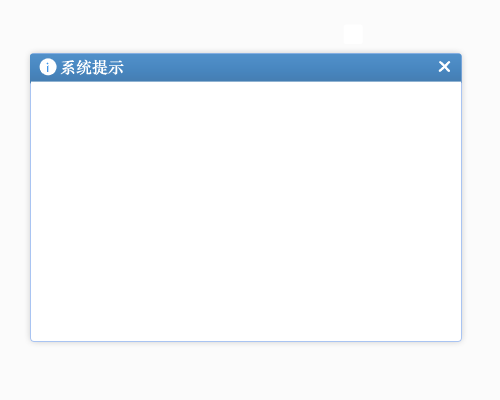
<style>
.page{position:relative;width:500px;height:400px;background:#ffffff}
.page>*{position:absolute;margin:0}
.t1{font:16px "STZhongsong";color:#ffffff}
.t2{font:12.7px "ComicSansMS";color:#ffffff;font-weight:bold;scale:1.29 1}
</style>
<div class="page">
<p class="t1" style="left:60px;top:59px;width:64px;height:16px">系统提示</p>
<p class="t2" style="left:438px;top:61px;width:13px;height:11px">X</p>
</div>
